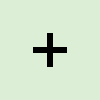
<style>
.page{position:relative;width:100px;height:100px;background:#dcefd6}
.page>*{position:absolute;margin:0}
.t1{font:72px "ArialMT";color:#000000}
</style>
<div class="page">
<p class="t1" style="left:33px;top:33px;width:34px;height:34px">+</p>
</div>
